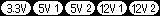
<style>
.page{position:relative;width:160px;height:16px;background:#ffffff}
.page>*{position:absolute;margin:0}
.t1{font:12px "Pix32PixelFont";color:#000000}
.t2{font:11.8px "Pix32PixelFont";color:#000000}
.t3{font:10px "Pix32PixelFont";color:#000000}
.t4{font:10.1px "Pix32PixelFont";color:#000000}
</style>
<div class="page">
<p class="t1" style="left:7px;top:4px;width:19px;height:9px">3.3V</p>
<p class="t2" style="left:39px;top:4px;width:19px;height:9px">5V <span class="t3">1</span></p>
<p class="t2" style="left:71px;top:4px;width:20px;height:9px">5V <span class="t3">2</span></p>
<p class="t1" style="left:100px;top:4px;width:22px;height:9px">12V <span class="t4">1</span></p>
<p class="t2" style="left:132px;top:4px;width:23px;height:9px">12V <span class="t3">2</span></p>
</div>
